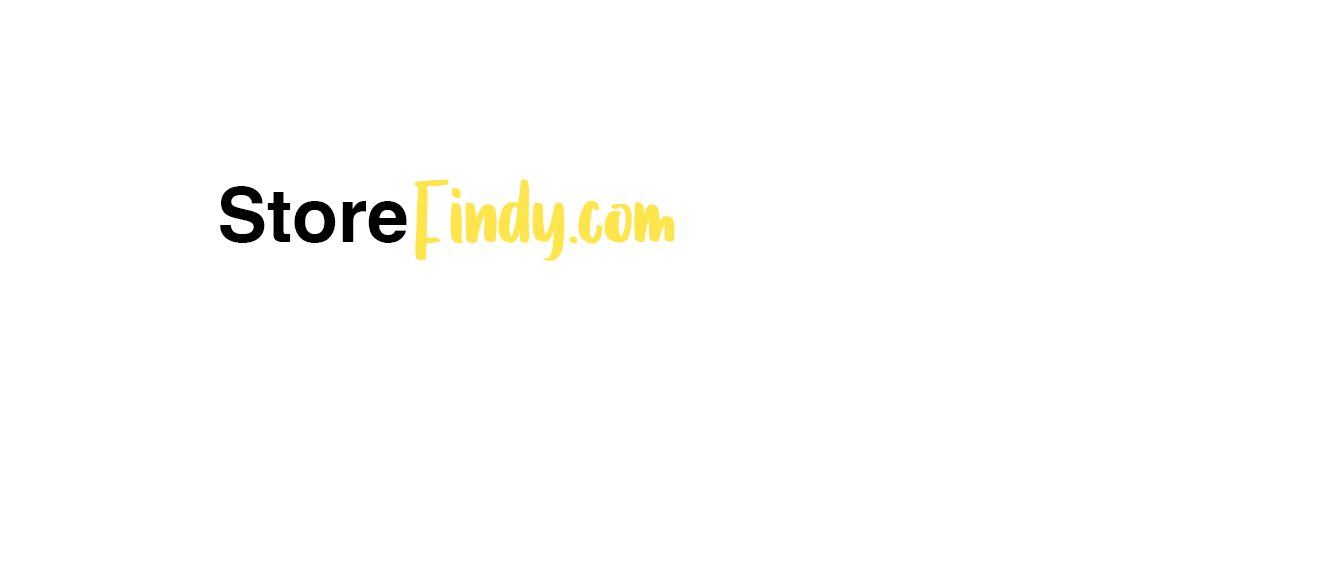
<style>
.page{position:relative;width:1335px;height:584px;background:#ffffff}
.page>*{position:absolute;margin:0}
.t1{font:115px "Samantha";color:#ffe54c}
.t2{font:75px "Helvetica-Bold";color:#000000}
</style>
<div class="page">
<p class="t1" style="left:415px;top:179px;width:258px;height:82px">Findy.com</p>
<p class="t1" style="left:417px;top:179px;width:258px;height:82px">Findy.com</p>
<p class="t2" style="left:220px;top:186px;width:187px;height:57px">Store</p>
</div>
